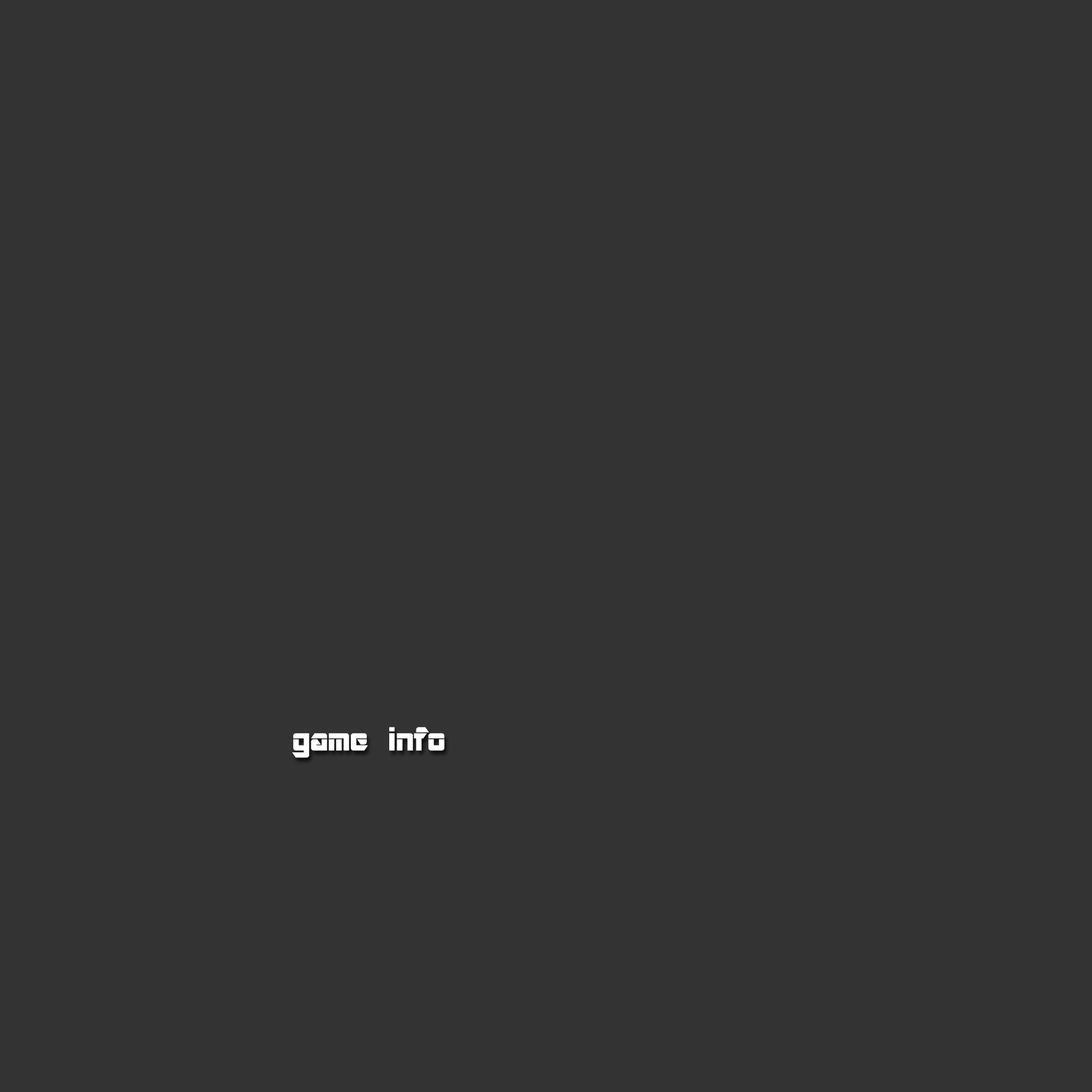
<style>
.page{position:relative;width:1092px;height:1092px;background:#333333}
.page>*{position:absolute;margin:0}
.t1{font:32px "ARDESTINE";color:#ffffff;scale:1.04 1}
</style>
<div class="page">
<p class="t1" style="left:292px;top:727px;width:153px;height:31px">game info</p>
</div>
